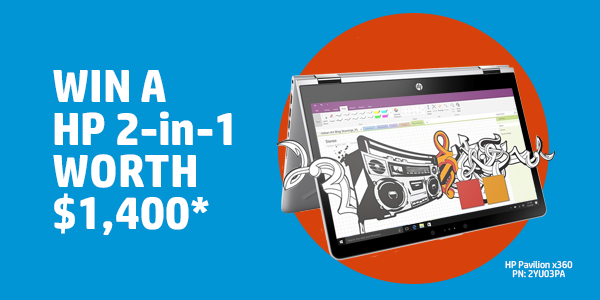
<style>
.page{position:relative;width:600px;height:300px;background:#0295d5}
.page>*{position:absolute;margin:0}
.t1{font:46.3px/42.4px "HPSimplified-Bold";color:#ffffff}
.t2{font:9.7px/9.1px "HPSimplified-Regular";color:#ffffff}
</style>
<div class="page">
<p class="t1" style="left:53px;top:70px;width:179px;height:165px">WIN A <br>HP 2-in-1<br>WORTH <br>$1,400*</p>
<p class="t2" style="left:505px;top:260px;width:68px;height:18px;text-align:center">HP Pavilion x360<br>PN: 2YU03PA</p>
</div>
